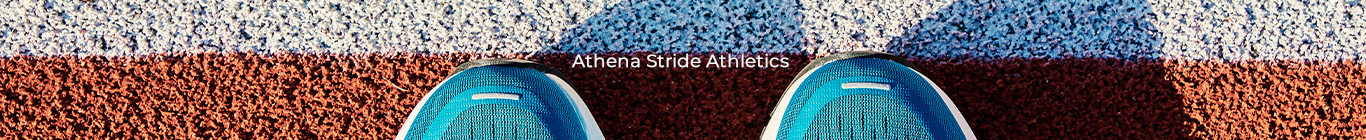
<style>
.page{position:relative;width:1366px;height:140px}
.page>*{position:absolute;margin:0}
.t1{font:18px "Montserrat-Regular";letter-spacing:-0.005em;color:#faf7f7;font-weight:bold}
</style>
<div class="page">
<p class="t1" style="left:572px;top:53px;width:217px;height:15px">Athena Stride Athletics</p>
</div>
